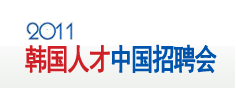
<style>
.page{position:relative;width:236px;height:89px;background:#ffffff}
.page>*{position:absolute;margin:0}
.t1{font:29.7px "SimHei";letter-spacing:-0.075em;color:#0054ac;font-weight:bold;scale:0.75 1}
.t2{font:29.7px "SimHei";letter-spacing:-0.075em;color:#ce1f26;font-weight:bold;scale:0.75 1}
</style>
<div class="page">
<p class="t1" style="left:25px;top:44px;width:192px;height:29px"><span class="t2">韩国人才</span>中国招聘会</p>
</div>
